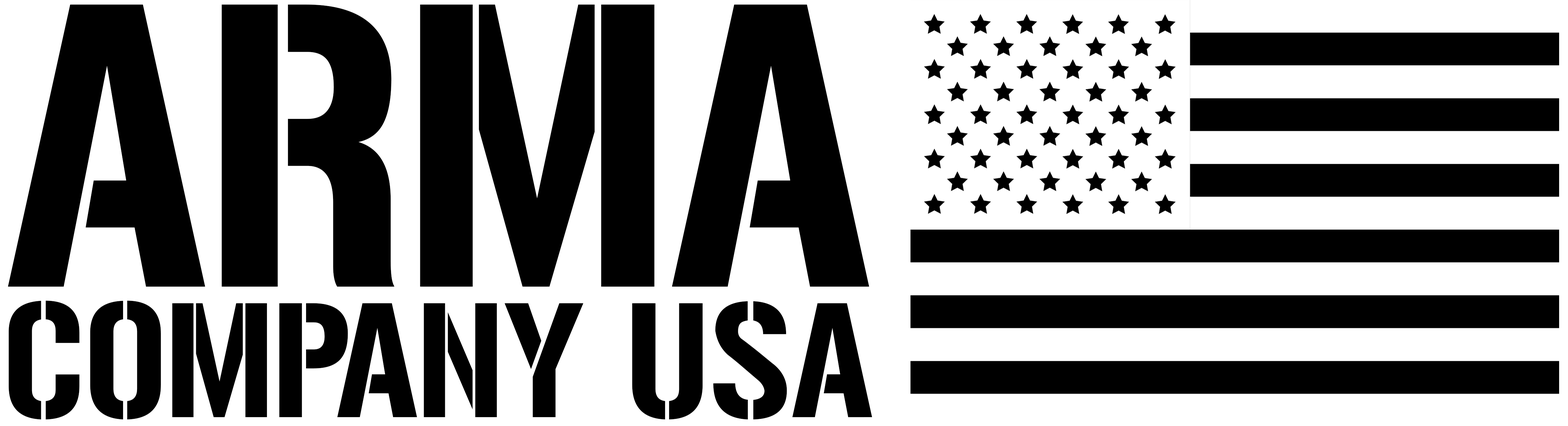
<style>
.page{position:relative;width:1568px;height:426px;background:#ffffff}
.page>*{position:absolute;margin:0}
.t1{font:356.1px "Gunplay-Regular";color:#000000;scale:0.87 1}
.t2{font:143.7px "Gunplay-Regular";color:#000000;scale:0.87 1}
</style>
<div class="page">
<p class="t1" style="left:8px;top:4px;width:861px;height:283px">ARMA</p>
<p class="t2" style="left:9px;top:301px;width:863px;height:119px">COMPANY USA</p>
</div>
